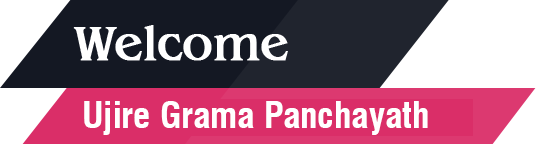
<style>
.page{position:relative;width:536px;height:144px;background:#ffffff}
.page>*{position:absolute;margin:0}
.t1{font:36px "Swiss721BT-BoldCondensed";color:#ffffff}
</style>
<div class="page">
<p class="t1" style="left:84px;top:101px;width:344px;height:34px">Ujire Grama Panchayath</p>
</div>
